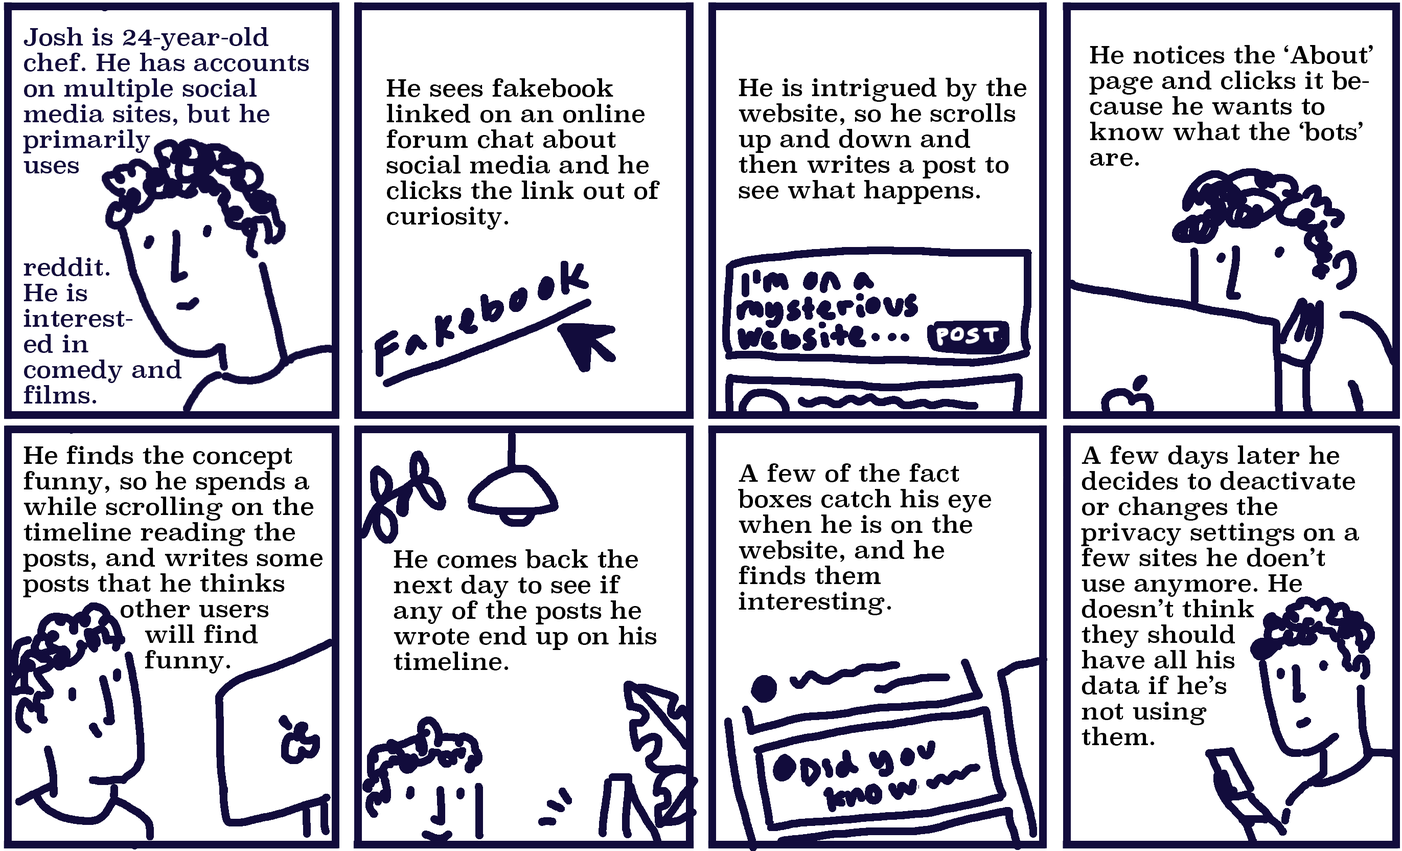
<style>
.page{position:relative;width:1402px;height:851px;background:#ffffff}
.page>*{position:absolute;margin:0}
.t1{font:23.4px/25.6px "Superclarendon-Regular";color:#120c3c}
.t2{font:23.4px/25.6px "Superclarendon-Regular";color:#000000}
</style>
<div class="page">
<p class="t1" style="left:23px;top:27px;width:286px;height:376px">Josh is 24-year-old<br>chef. He has accounts<br>on multiple social<br>media sites, but he<br>primarily<br>uses<br><br><br><br>reddit.<br>He is<br>interest-<br>ed in<br>comedy and<br>films.</p>
<p class="t2" style="left:1089px;top:45px;width:284px;height:121px">He notices the ‘About’ page and clicks it because he wants to know what the ‘bots’ are.</p>
<p class="t2" style="left:739px;top:78px;width:288px;height:126px">He is intrigued by the website, so he scrolls up and down and then writes a post to see what happens.</p>
<p class="t2" style="left:386px;top:78px;width:274px;height:151px">He sees fakebook linked on an online forum chat about social media and he clicks the link out of curiosity.</p>
<p class="t2" style="left:23px;top:445px;width:300px;height:228px">He finds the concept funny, so he spends a while scrolling on the timeline reading the posts, and writes some posts that he thinks<br>            other users<br>               will find<br>               funny.</p>
<p class="t2" style="left:1081px;top:445px;width:278px;height:300px">A few days later he decides to deactivate or changes the <br>privacy settings on a few sites he doen’t use anymore. He doesn’t think <br>they should <br>have all his <br>data if he’s <br>not using <br>them.</p>
<p class="t2" style="left:738px;top:463px;width:254px;height:152px">A few of the fact boxes catch his eye when he is on the website, and he finds them <br>interesting.</p>
<p class="t2" style="left:394px;top:549px;width:263px;height:121px">He comes back the next day to see if any of the posts he wrote end up on his timeline.</p>
</div>
